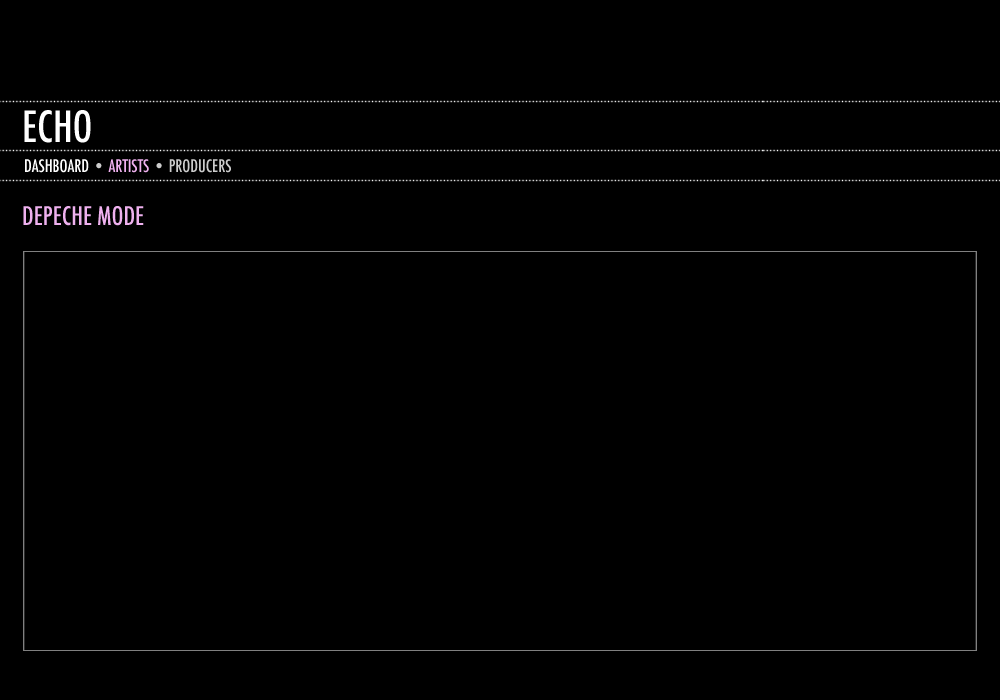
<style>
.page{position:relative;width:1000px;height:700px;background:#000000}
.page>*{position:absolute;margin:0}
.t1{font:41.7px "Futura-CondensedMedium";color:#ffffff}
.t2{font:16.7px "Futura-CondensedMedium";color:#cccccc}
.t3{font:16.7px "Futura-CondensedMedium";color:#fefefe}
.t4{font:16.7px "Futura-CondensedMedium";color:#efb1ef}
.t5{font:25px "Futura-CondensedMedium";color:#efb1ef}
</style>
<div class="page">
<p class="t1" style="left:24px;top:110px;width:67px;height:33px">ECHO</p>
<p class="t2" style="left:25px;top:159px;width:206px;height:14px"><span class="t3">DASHBOARD </span>• <span class="t4">ARTISTS </span>• PRODUCERS</p>
<p class="t5" style="left:23px;top:206px;width:121px;height:20px">DEPECHE MODE</p>
</div>
